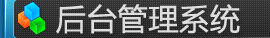
<style>
.page{position:relative;width:270px;height:38px}
.page>*{position:absolute;margin:0}
.t1{font:30px "MicrosoftYaHei";color:#dedede;font-weight:bold}
</style>
<div class="page">
<p class="t1" style="left:56px;top:4px;width:184px;height:30px">后台管理系统</p>
</div>
